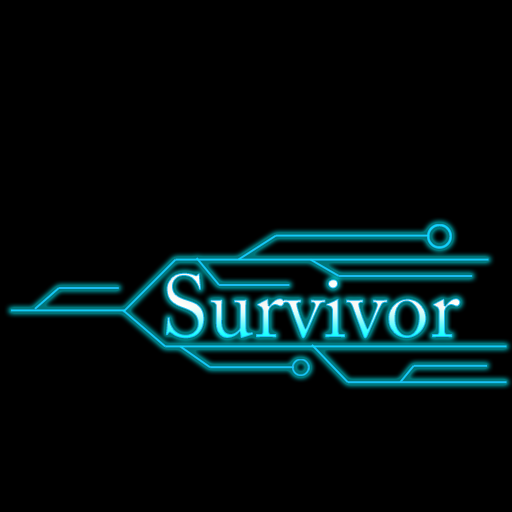
<style>
.page{position:relative;width:512px;height:512px;background:#000000}
.page>*{position:absolute;margin:0}
.t1{font:89.1px "ACaslonPro-Regular"}
</style>
<div class="page">
<p class="t1" style="left:165px;top:272px;width:296px;height:67px">Survivor</p>
</div>
